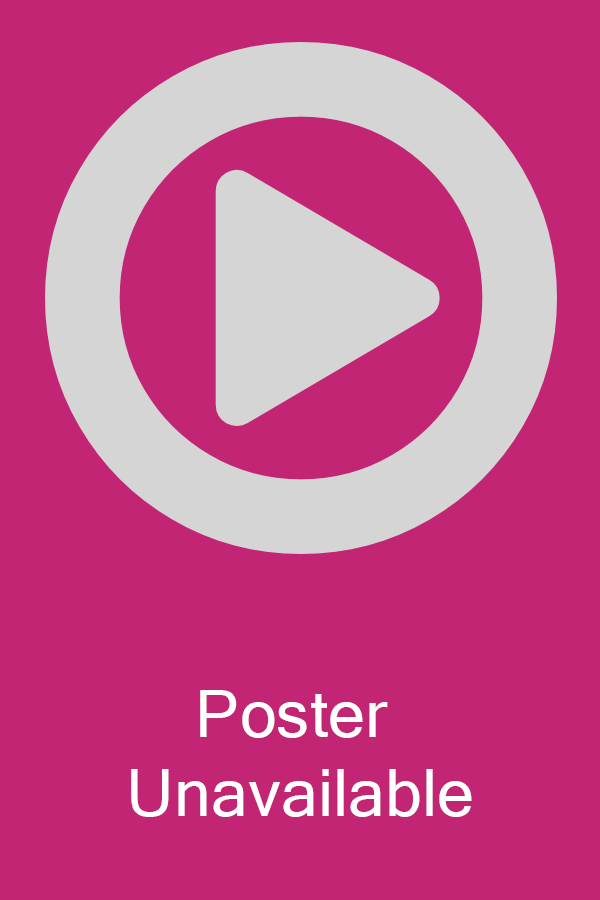
<style>
.page{position:relative;width:600px;height:900px;background:#c12573}
.page>*{position:absolute;margin:0}
.t1{font:66.2px "MicrosoftSansSerif";color:#ffffff}
</style>
<div class="page">
<p class="t1" style="left:131px;top:690px;width:341px;height:127px;text-align:center">Poster <br>Unavailable</p>
</div>
